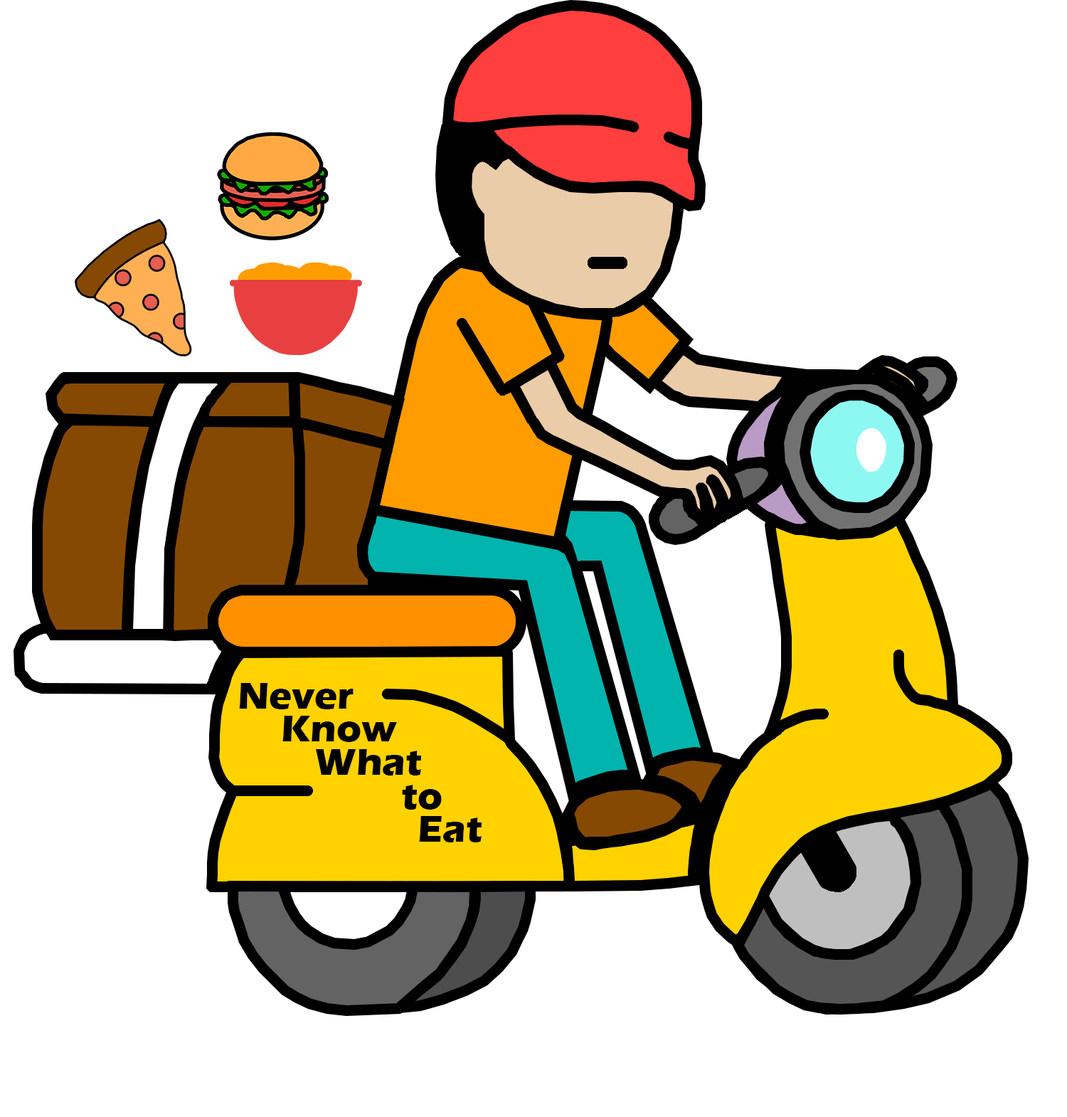
<style>
.page{position:relative;width:1067px;height:1117px;background:#ffffff}
.page>*{position:absolute;margin:0}
.t1{font:38.5px "ErasITC-Bold";color:#000000}
</style>
<div class="page">
<p class="t1" style="left:239px;top:683px;width:115px;height:26px">Never</p>
<p class="t1" style="left:282px;top:716px;width:115px;height:26px">Know</p>
<p class="t1" style="left:316px;top:749px;width:105px;height:27px">What</p>
<p class="t1" style="left:402px;top:785px;width:40px;height:25px">to</p>
<p class="t1" style="left:419px;top:816px;width:63px;height:27px">Eat</p>
</div>
